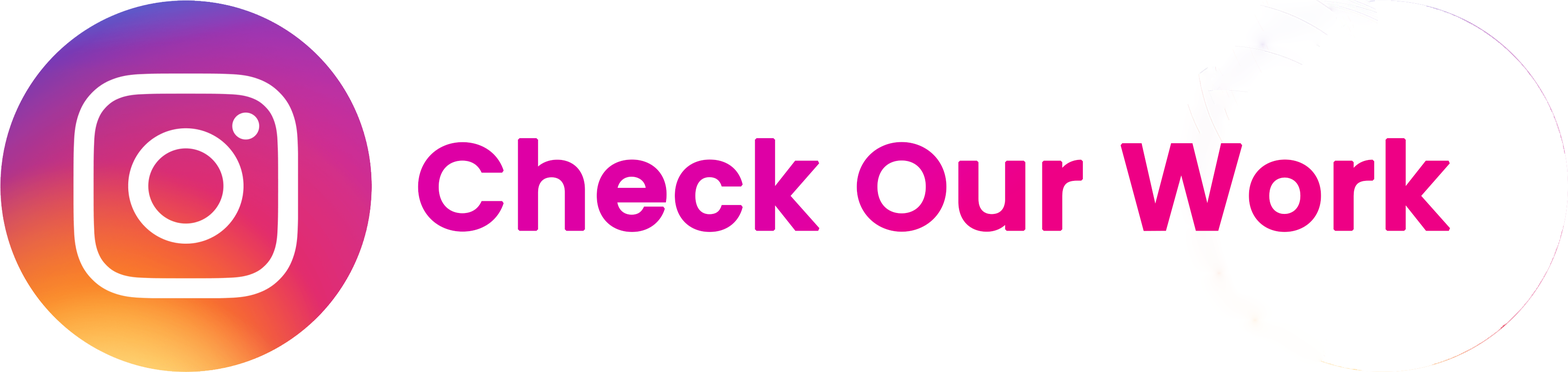
<style>
.page{position:relative;width:1568px;height:372px;background:#ffffff}
.page>*{position:absolute;margin:0}
.t1{font:120.8px "Poppins-SemiBold";color:#ea0095;font-weight:bold}
</style>
<div class="page">
<p class="t1" style="left:418px;top:138px;width:1032px;height:94px">Check Our Work</p>
</div>
